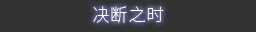
<style>
.page{position:relative;width:256px;height:32px;background:#333333}
.page>*{position:absolute;margin:0}
.t1{font:17px "NotoSansSC-Thin";letter-spacing:0.06em;color:#ffffff}
</style>
<div class="page">
<p class="t1" style="left:93px;top:6px;width:70px;height:17px">决断之时</p>
</div>
